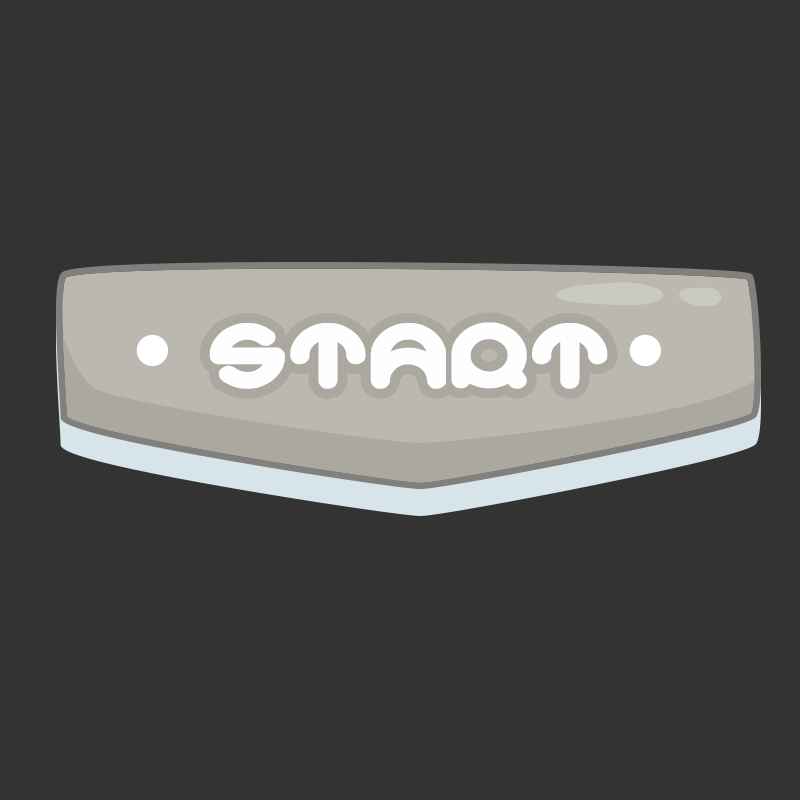
<style>
.page{position:relative;width:800px;height:800px;background:#333333}
.page>*{position:absolute;margin:0}
.t1{font:99.7px "smileyturtle";color:#fffefe;scale:1.15 1}
</style>
<div class="page">
<p class="t1" style="left:209px;top:322px;width:399px;height:67px">sTART</p>
</div>
